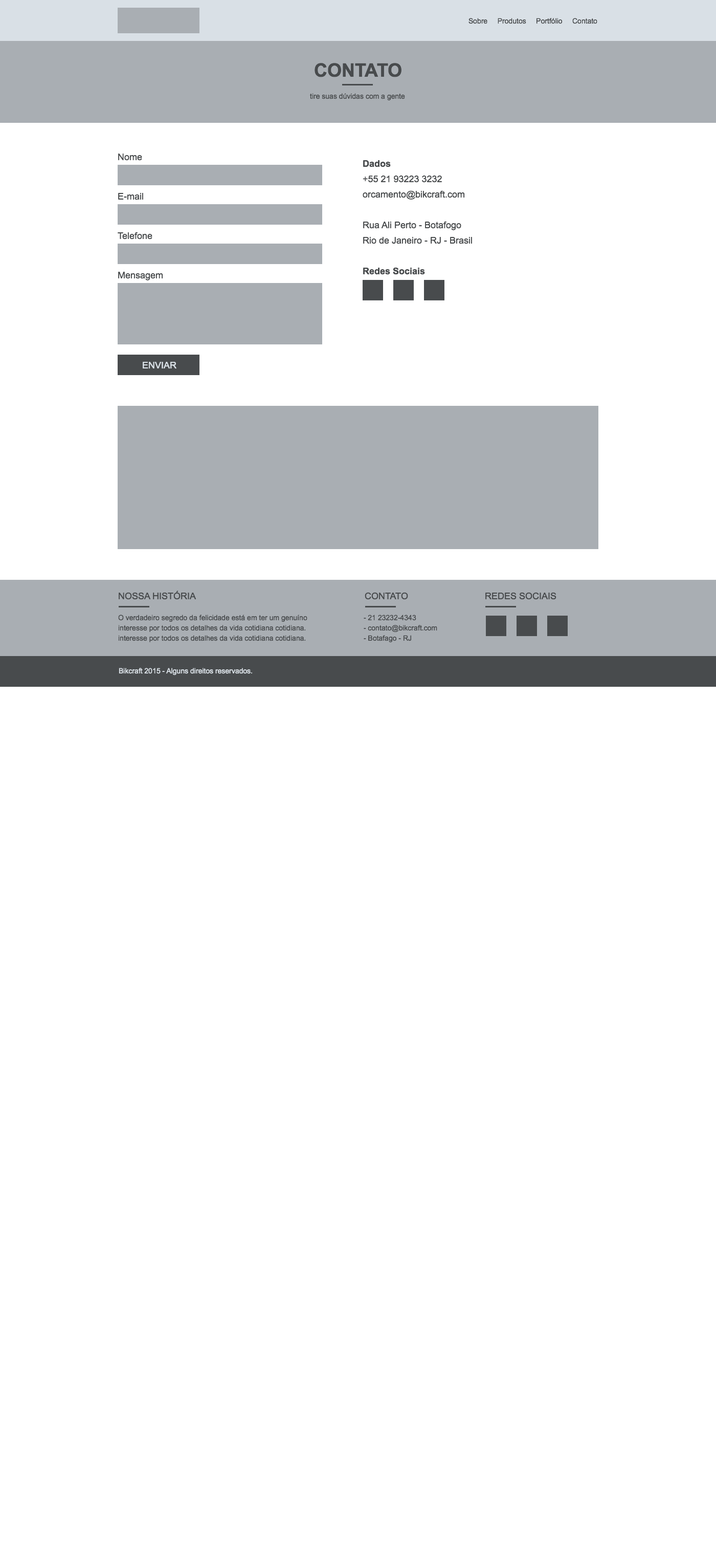
<style>
.page{position:relative;width:716px;height:1568px;background:#ffffff}
.page>*{position:absolute;margin:0}
.t1{font:7.2px "ArialMT";color:#484b4d}
.t2{font:18.4px "Arial-BoldMT";color:#484b4d;text-transform:uppercase}
.t3{font:9.2px "ArialMT";color:#484b4d}
.t4{font:9.2px/15.4px "ArialMT";color:#484b4d}
.t5{font:9.2px/15.4px "Arial-BoldMT";color:#484b4d}
.t6{font:9.2px "ArialMT";color:#d9e0e6}
.t7{font:9.2px "ArialMT";color:#484b4d;text-transform:uppercase}
.t8{font:7.2px/10.2px "ArialMT";color:#484b4d}
.t9{font:7.2px "ArialMT";color:#d9e0e6}
</style>
<div class="page">
<p class="t1" style="left:469px;top:18px;width:129px;height:6px">Sobre     Produtos     Portfólio     Contato</p>
<p class="t2" style="left:315px;top:63px;width:87px;height:14px">CONTATO</p>
<p class="t1" style="left:310px;top:93px;width:95px;height:7px">tire suas dúvidas com a gente</p>
<p class="t3" style="left:118px;top:154px;width:24px;height:7px">Nome</p>
<p class="t4" style="left:363px;top:160px;width:109px;height:115px"><span class="t5">Dados<br></span>+55 21 93223 3232<br>orcamento@bikcraft.com<br><br>Rua Ali Perto - Botafogo<br>Rio de Janeiro - RJ - Brasil<br><br><span class="t5">Redes Sociais</span></p>
<p class="t3" style="left:118px;top:193px;width:25px;height:7px">E-mail</p>
<p class="t3" style="left:118px;top:232px;width:35px;height:7px">Telefone</p>
<p class="t3" style="left:118px;top:272px;width:45px;height:8px">Mensagem</p>
<p class="t6" style="left:143px;top:362px;width:34px;height:6px">ENVIAR</p>
<p class="t7" style="left:119px;top:591px;width:78px;height:9px">Nossa História</p>
<p class="t7" style="left:365px;top:592px;width:43px;height:8px">Contato</p>
<p class="t7" style="left:486px;top:592px;width:71px;height:8px">Redes sociais</p>
<p class="t8" style="left:118px;top:615px;width:190px;height:27px">O verdadeiro segredo da felicidade está em ter um genuíno interesse por todos os detalhes da vida cotidiana cotidiana.<br>interesse por todos os detalhes da vida cotidiana cotidiana.</p>
<p class="t8" style="left:364px;top:615px;width:74px;height:27px">- 21 23232-4343<br>- contato@bikcraft.com<br>- Botafago - RJ</p>
<p class="t9" style="left:119px;top:668px;width:133px;height:7px">Bikcraft 2015 - Alguns direitos reservados.</p>
</div>
